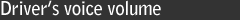
<style>
.page{position:relative;width:240px;height:20px;background:#333333}
.page>*{position:absolute;margin:0}
.t1{font:19px "BellGothicStd-Bold";letter-spacing:-0.025em;color:#ffffff}
</style>
<div class="page">
<p class="t1" style="left:1px;top:0px;width:160px;height:16px">Driver’s voice volume</p>
</div>
